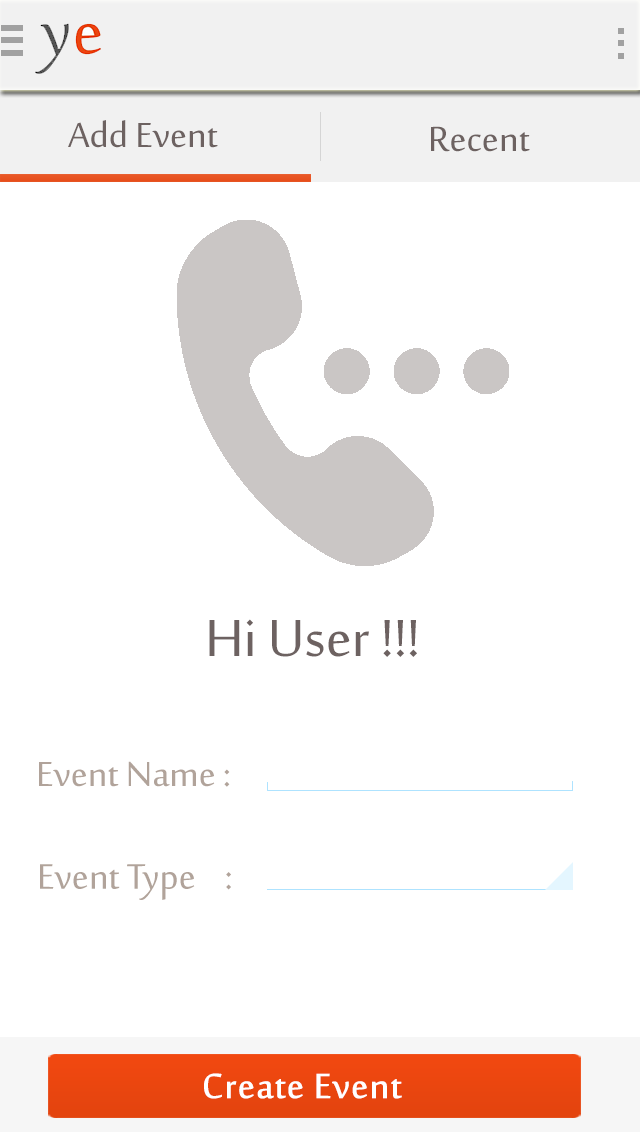
<style>
.page{position:relative;width:640px;height:1134px;background:#ffffff}
.page>*{position:absolute;margin:0}
.t1{font:48px "SakkalMajalla";color:#6d6261}
.t2{font:72px "SakkalMajalla";color:#6d6261}
.t3{font:48px "SakkalMajalla";color:#b1a39a}
.t4{font:48.6px "SakkalMajalla";color:#b1a39a}
.t5{font:48px "SakkalMajalla";color:#ffffff;font-weight:bold}
</style>
<div class="page">
<p class="t1" style="left:68px;top:120px;width:150px;height:28px">Add Event</p>
<p class="t1" style="left:431px;top:126px;width:99px;height:26px">Recent</p>
<p class="t2" style="left:209px;top:619px;width:208px;height:38px">Hi User !!!</p>
<p class="t3" style="left:39px;top:761px;width:191px;height:26px">Event Name :</p>
<p class="t4" style="left:40px;top:864px;width:191px;height:36px">Event Type    :</p>
<p class="t5" style="left:204px;top:1073px;width:198px;height:26px">Create Event</p>
</div>
